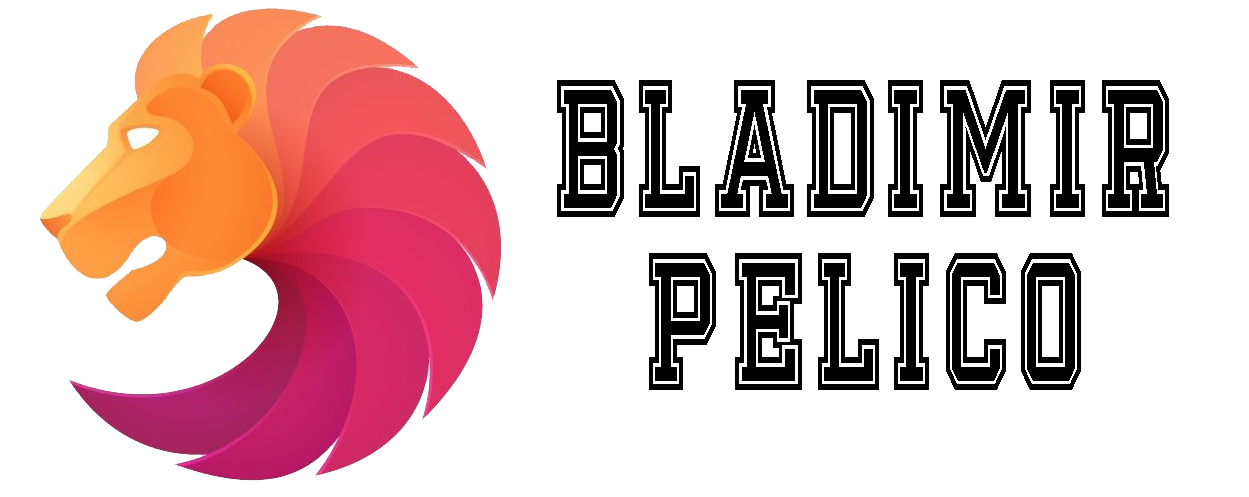
<style>
.page{position:relative;width:1249px;height:497px;background:#ffffff}
.page>*{position:absolute;margin:0}
.t1{font:150px/173.6px "Emilio20";color:#000100;scale:0.67 1}
</style>
<div class="page">
<p class="t1" style="left:557px;top:80px;width:612px;height:310px;text-align:center">Bladimir Pelico</p>
</div>
